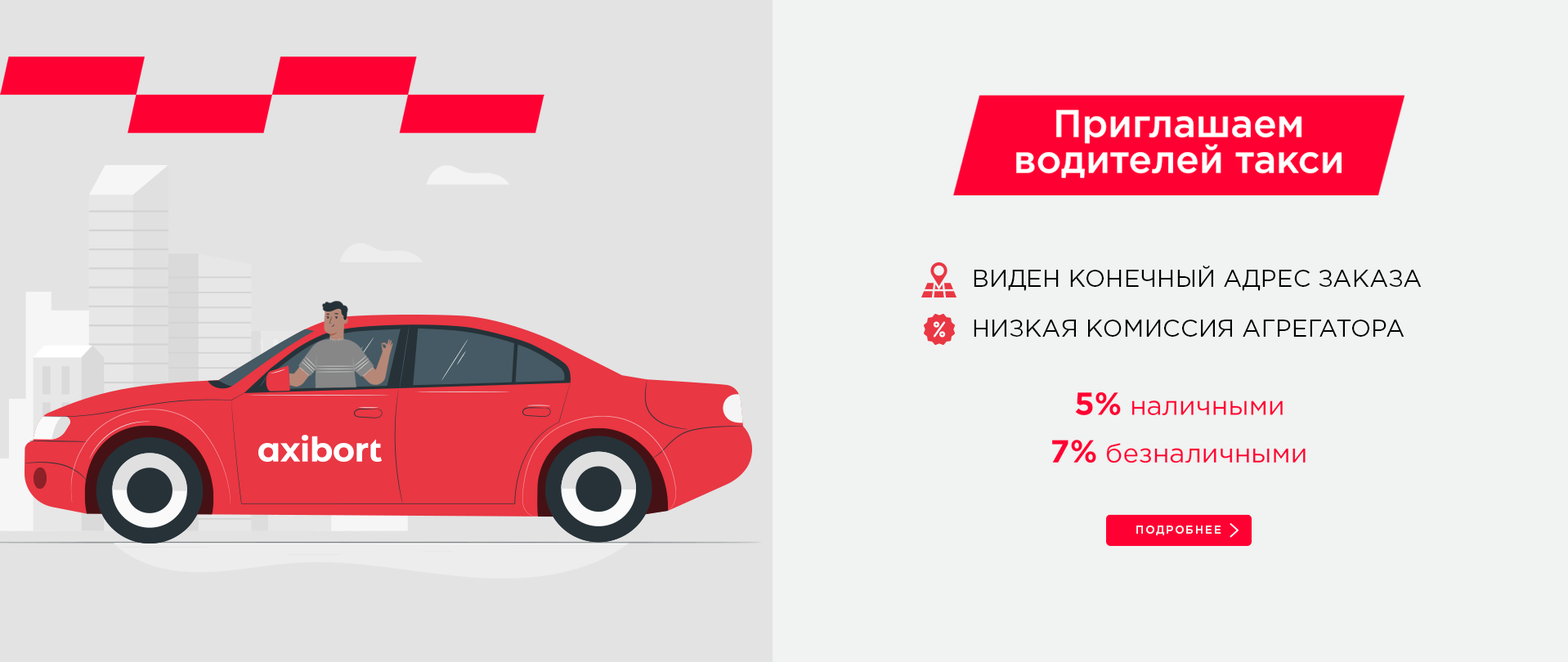
<style>
.page{position:relative;width:1568px;height:662px;background:#f1f2f2}
.page>*{position:absolute;margin:0}
.t1{font:38.6px/14.4px "GothamPro-Medium";color:#ffffff}
.t2{font:24.2px/11.6px "GothamPro";color:#000000;text-transform:uppercase}
.t3{font:27px "GothamPro";color:#ff0033}
.t4{font:27px "GothamPro";color:#ff0033;text-transform:uppercase}
.t5{font:31.9px "GothamPro-Bold";color:#ff0033}
.t6{font:10.7px "GothamPro-Medium";letter-spacing:0.164em;color:#f1f2f2;text-transform:uppercase}
</style>
<div class="page">
<p class="t1" style="left:1016px;top:110px;width:326px;height:68px;text-align:center">Приглашаем<br>водителей такси</p>
<p class="t2" style="left:974px;top:266px;width:448px;height:71px">виден конечный адрес заказа<br><br>низкая комиссия агрегатора</p>
<p class="t3" style="left:1075px;top:392px;width:208px;height:23px"><span class="t4"><br><br></span><span class="t5">5%</span> наличными</p>
<p class="t3" style="left:1052px;top:440px;width:254px;height:23px"><span class="t5">7%</span> безналичными</p>
<p class="t6" style="left:1136px;top:526px;width:85px;height:9px">Подробнее</p>
</div>
